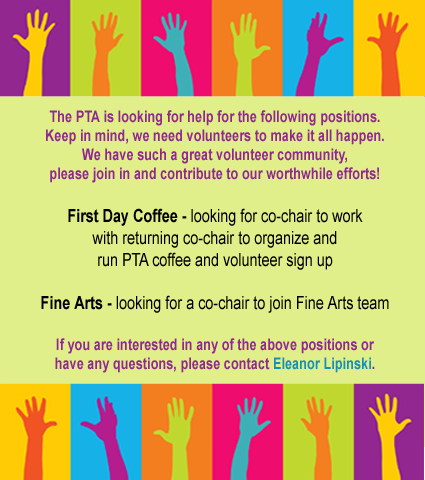
<style>
.page{position:relative;width:425px;height:480px;background:#e1ef8b}
.page>*{position:absolute;margin:0}
.t1{font:16px "Arial-BoldMT";color:#92278f;scale:0.8 1}
.t2{font:18px "Arial-BoldMT";color:#000000;scale:0.8 1}
.t3{font:18px "ArialMT";color:#000000;scale:0.8 1}
.t4{font:16px "Arial-BoldMT";color:#148fba;scale:0.8 1}
</style>
<div class="page">
<p class="t1" style="left:41px;top:110px;width:348px;height:263px;text-align:center">The PTA is looking for help for the following positions.  <br>Keep in mind, we need volunteers to make it all happen.  <br>We have such a great volunteer community, <br>please join in and contribute to our worthwhile efforts!<br><br><span class="t2">First Day Coffee - </span><span class="t3">looking for co-chair to work<br>with returning co-chair to organize and<br>run PTA coffee and volunteer sign up <br></span><span class="t2"><br>Fine Arts - </span><span class="t3">looking for a co-chair to join Fine Arts team<br><br></span>If you are interested in any of the above positions or <br>have any questions, please contact <span class="t4">Eleanor Lipinski</span>.</p>
</div>
